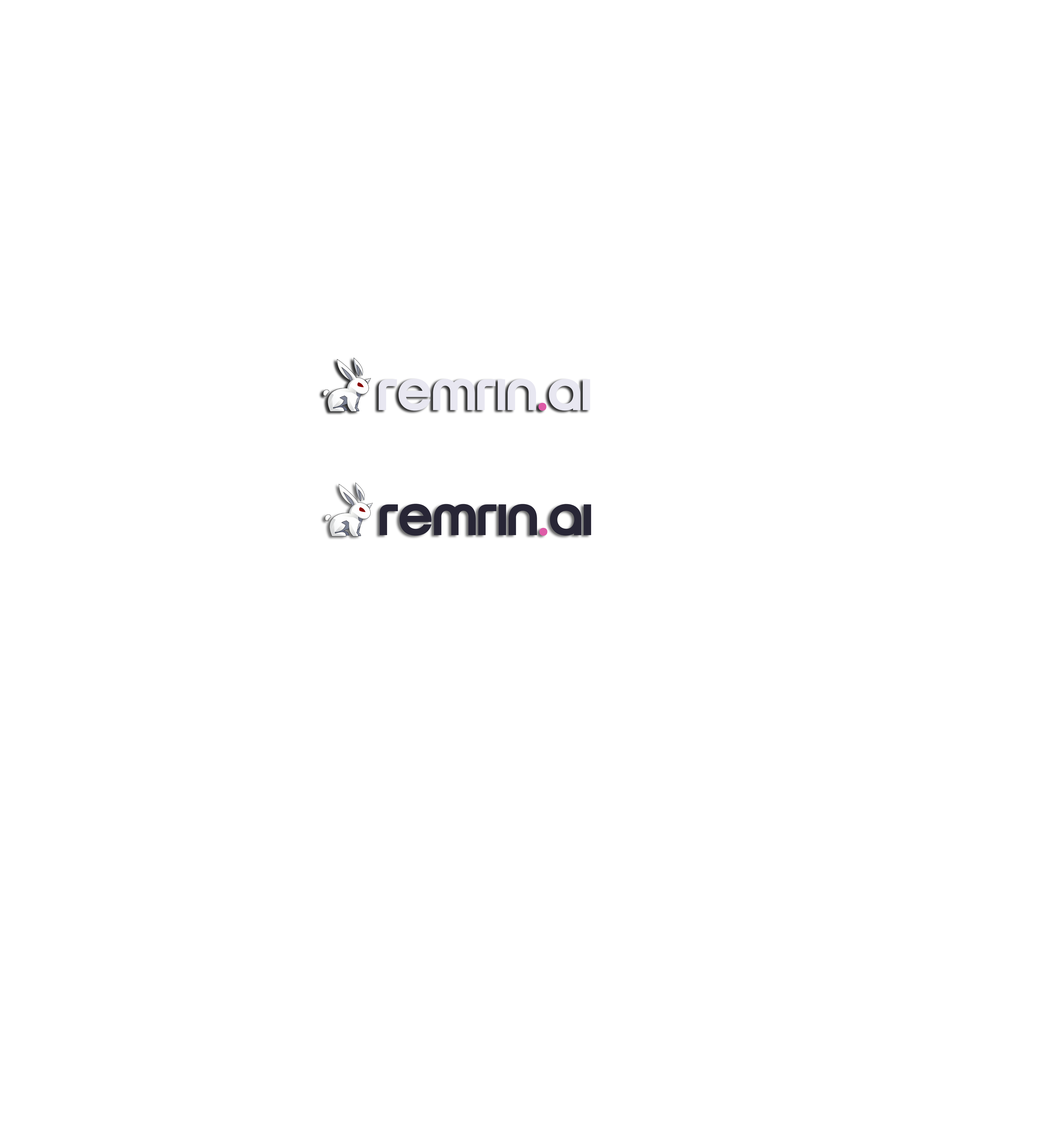
<style>
.page{position:relative;width:1049px;height:1137px;background:#ffffff}
.page>*{position:absolute;margin:0}
.t1{font:61.4px "Monda-Regular";color:#282636}
.t2{font:61.4px "Monda-Regular";color:#de5ba7}
</style>
<div class="page">
<p class="t1" style="left:380px;top:504px;width:211px;height:32px">remrin<span class="t2">.</span>ai</p>
</div>
